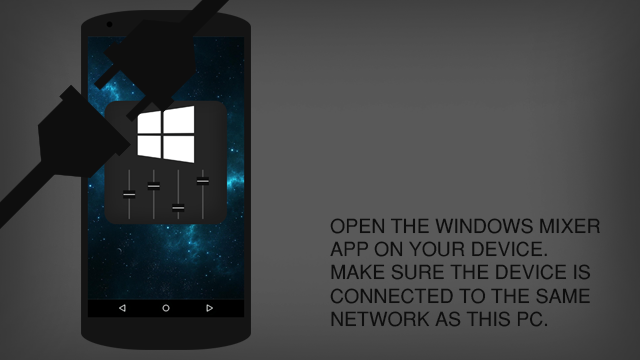
<style>
.page{position:relative;width:640px;height:360px}
.page>*{position:absolute;margin:0}
.t1{font:19.4px "Helvetica-Normal";color:#0e0e0e}
</style>
<div class="page">
<p class="t1" style="left:330px;top:218px;width:270px;height:109px">OPEN THE WINDOWS MIXER APP ON YOUR DEVICE. <br>MAKE SURE THE DEVICE IS CONNECTED TO THE SAME NETWORK AS THIS PC.</p>
</div>
